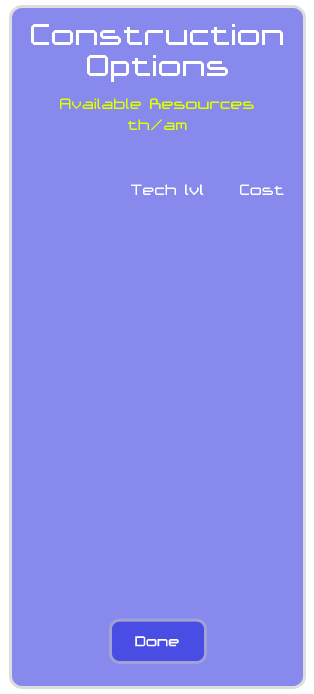
<style>
.page{position:relative;width:314px;height:694px;background:#8789ec}
.page>*{position:absolute;margin:0}
.t1{font:48px "Ace-Futurism";color:#ffffff}
.t2{font:24px "Ace-Futurism";color:#deff00}
.t3{font:24px "Ace-Futurism";color:#ffffff}
.t4{font:22.3px "Ace-Futurism";color:#ffffff}
</style>
<div class="page">
<p class="t1" style="left:31px;top:24px;width:252px;height:21px">Construction</p>
<p class="t1" style="left:87px;top:55px;width:141px;height:27px">Options</p>
<p class="t2" style="left:60px;top:98px;width:194px;height:11px">Available Resources</p>
<p class="t2" style="left:128px;top:119px;width:59px;height:11px">th/am</p>
<p class="t3" style="left:131px;top:184px;width:73px;height:11px">Tech lvl</p>
<p class="t3" style="left:240px;top:184px;width:44px;height:11px">Cost</p>
<p class="t4" style="left:135px;top:636px;width:44px;height:11px">Done</p>
</div>
